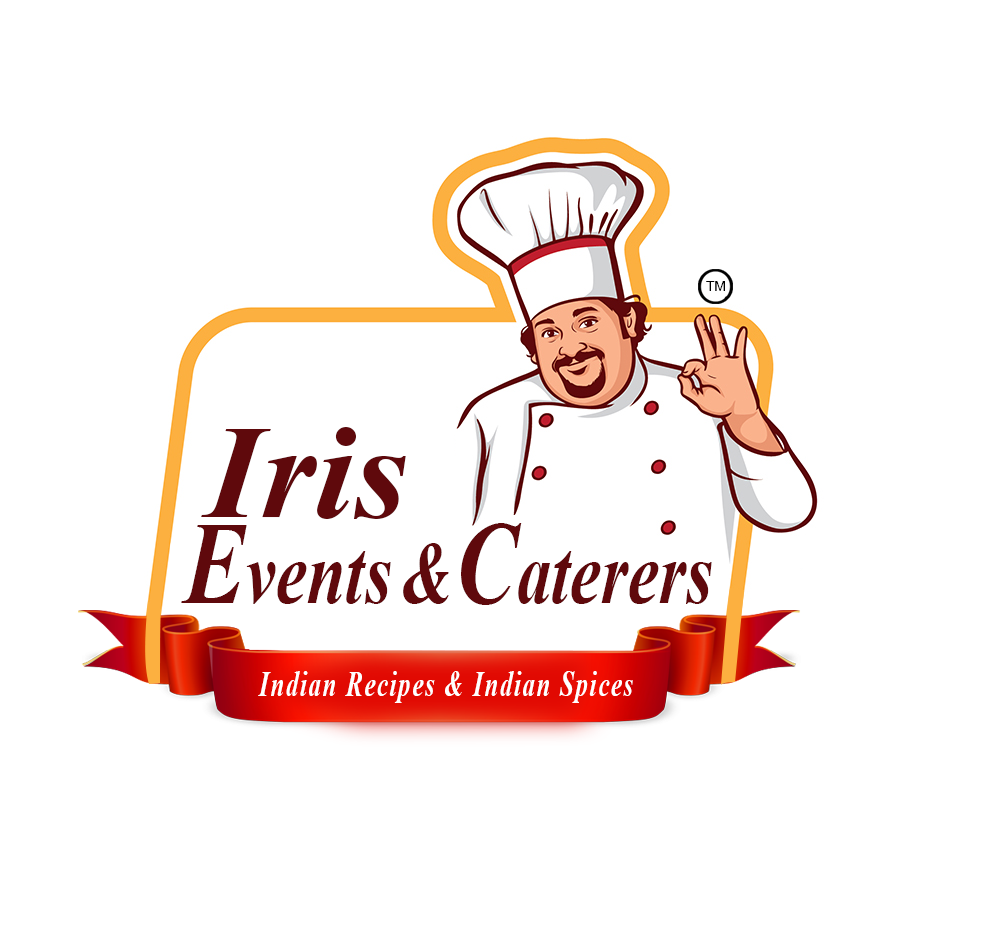
<style>
.page{position:relative;width:1000px;height:944px;background:#ffffff}
.page>*{position:absolute;margin:0}
.t1{font:13.7px "ArialMT";color:#000000;text-transform:uppercase}
.t2{font:131.8px "TimesNewRomanPS-BoldItalicMT";color:#5f090c;scale:1.06 1}
.t3{font:131.8px "TimesNewRomanPS-BoldItalicMT";color:#5f090c;text-transform:uppercase;scale:1.06 1}
.t4{font:21.3px "TimesNewRomanPS-BoldItalicMT";color:#5f090c;scale:0.78 1}
.t5{font:118.4px "TimesNewRomanPS-BoldItalicMT";color:#5f090c;text-transform:uppercase;scale:0.78 1}
.t6{font:118.3px "TimesNewRomanPS-BoldItalicMT";color:#5f090c;text-transform:uppercase;scale:0.78 1}
.t7{font:35px "TimesNewRomanPS-BoldItalicMT";letter-spacing:0.06em;color:#ffffff;scale:0.72 1}
.t8{font:35px "TimesNewRomanPS-BoldItalicMT";letter-spacing:0.06em;color:#ffffff;text-transform:uppercase;scale:0.72 1}
</style>
<div class="page">
<p class="t1" style="left:706px;top:281px;width:19px;height:10px">tm</p>
<p class="t2" style="left:201px;top:427px;width:205px;height:92px"><span class="t3">i</span>ris</p>
<p class="t4" style="left:181px;top:523px;width:531px;height:82px"><span class="t5">e</span>vents &amp; <span class="t6">c</span>aterers</p>
<p class="t7" style="left:258px;top:671px;width:375px;height:32px"><span class="t8">i</span>ndian <span class="t8">r</span>ecipes &amp; <span class="t8">i</span>ndian <span class="t8">s</span>pices</p>
</div>
